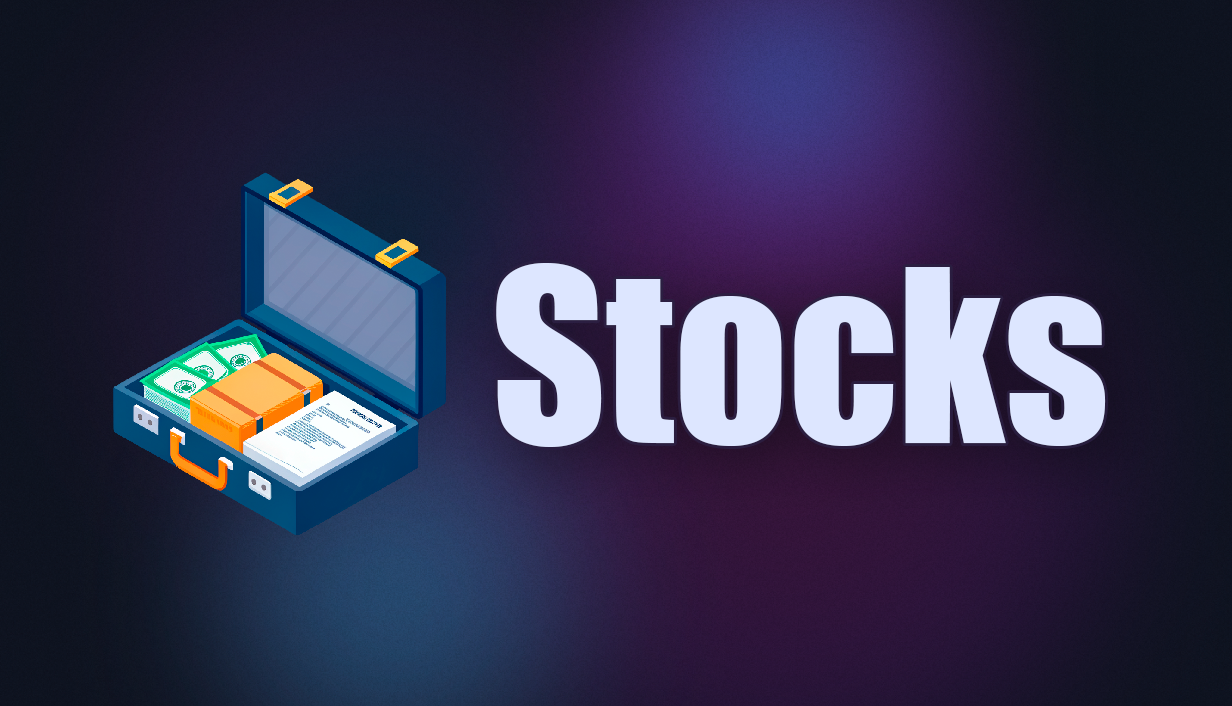
<style>
.page{position:relative;width:1232px;height:706px}
.page>*{position:absolute;margin:0}
.t1{font:222.5px "Impact";color:#dde6ff}
</style>
<div class="page">
<p class="t1" style="left:496px;top:263px;width:610px;height:184px">Stocks</p>
</div>
